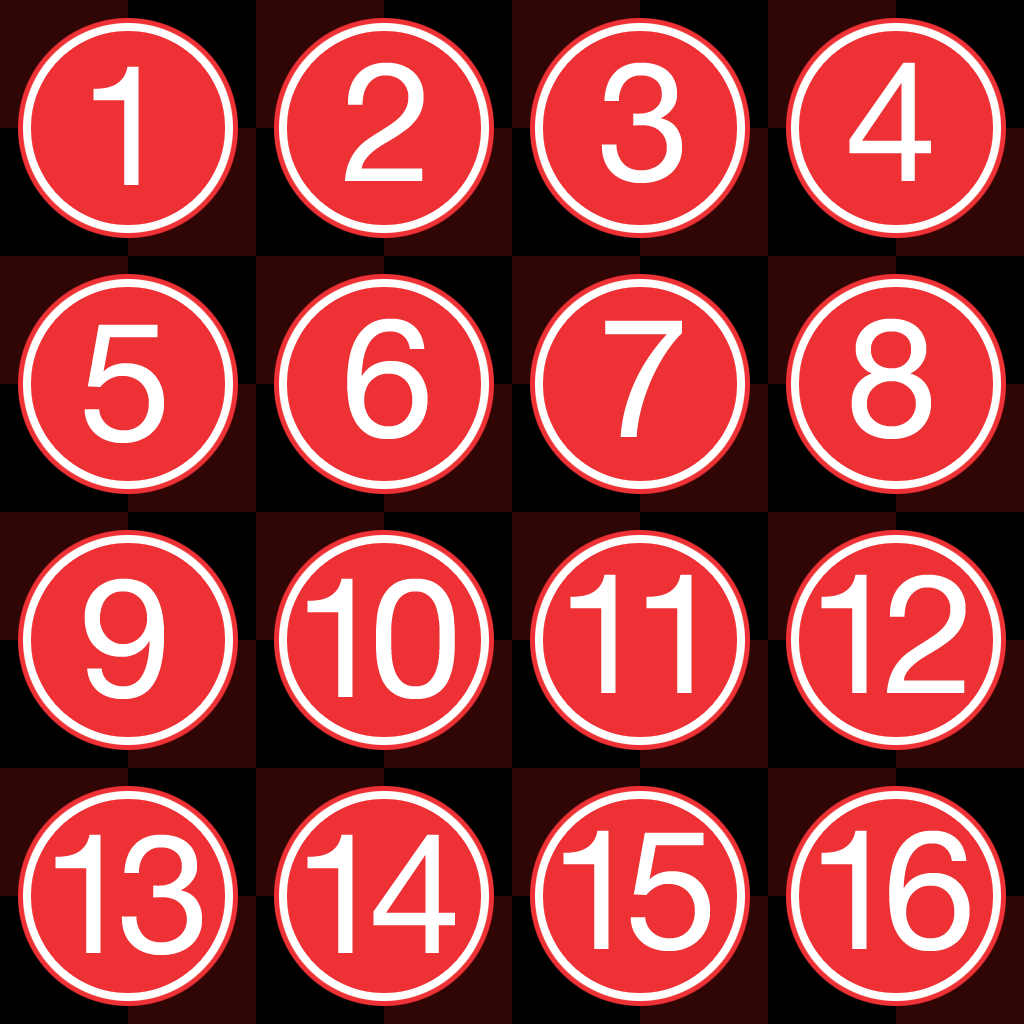
<style>
.page{position:relative;width:1024px;height:1024px;background:#ee3134}
.page>*{position:absolute;margin:0}
.t1{font:166.7px "HelveticaNeueLTCom-Roman";color:#ffffff}
.t2{font:166.7px "HelveticaNeueLTCom-Roman";letter-spacing:-0.1em;color:#ffffff}
</style>
<div class="page">
<p class="t1" style="left:344px;top:62px;width:80px;height:119px">2</p>
<p class="t1" style="left:601px;top:62px;width:81px;height:121px">3</p>
<p class="t1" style="left:849px;top:62px;width:82px;height:119px">4</p>
<p class="t1" style="left:93px;top:66px;width:46px;height:119px">1</p>
<p class="t1" style="left:347px;top:318px;width:81px;height:121px">6</p>
<p class="t1" style="left:851px;top:318px;width:80px;height:121px">8</p>
<p class="t1" style="left:84px;top:324px;width:80px;height:119px">5</p>
<p class="t1" style="left:605px;top:320px;width:77px;height:117px">7</p>
<p class="t1" style="left:84px;top:578px;width:80px;height:121px">9</p>
<p class="t2" style="left:307px;top:578px;width:148px;height:121px">10</p>
<p class="t2" style="left:570px;top:574px;width:122px;height:119px">11</p>
<p class="t2" style="left:821px;top:574px;width:145px;height:119px">12</p>
<p class="t2" style="left:563px;top:830px;width:147px;height:121px">15</p>
<p class="t2" style="left:821px;top:830px;width:149px;height:121px">16</p>
<p class="t2" style="left:55px;top:834px;width:147px;height:121px">13</p>
<p class="t2" style="left:307px;top:834px;width:148px;height:119px">14</p>
</div>
